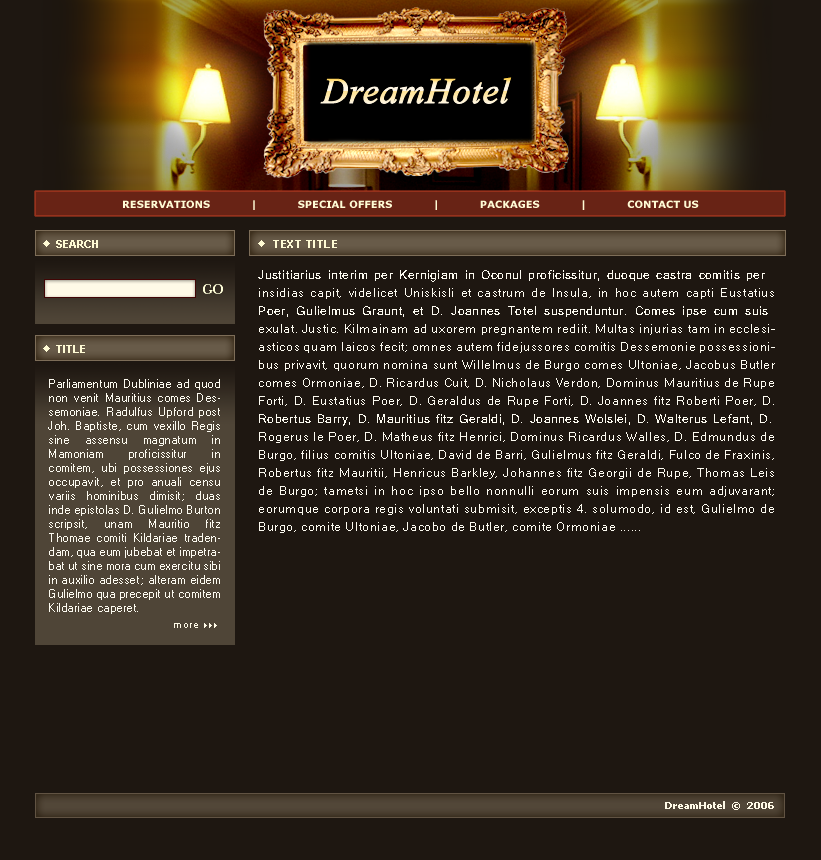
<style>
.page{position:relative;width:821px;height:860px;background:#1e1711}
.page>*{position:absolute;margin:0}
.t1{font:36px "TimesNewRomanPS-ItalicMT";color:#fbeece;font-weight:bold}
.t2{font:10px "Verdana-Bold";color:#fffbd5;text-transform:uppercase}
.t3{font:11px "Arial-BoldMT";color:#fffbd5;text-transform:uppercase}
.t4{font:11px "Arial-BoldMT";letter-spacing:0.05em;color:#fffbd5;text-transform:uppercase}
.t5{font:12px/18px "MicrosoftSansSerif";letter-spacing:0.05em;color:#fdfbf1}
.t6{font:14px "NewBaskerville-Roman";color:#ffffd9;text-transform:uppercase}
.t7{font:11px/14px "MicrosoftSansSerif";letter-spacing:0.05em;color:#fdfbf1}
.t8{font:10px "ArialMT";letter-spacing:0.05em;color:#fffae7}
.t9{font:10px "Tahoma-Bold";color:#fffae7}
</style>
<div class="page">
<p class="t1" style="left:320px;top:77px;width:192px;height:27px">DreamHotel</p>
<p class="t2" style="left:123px;top:200px;width:576px;height:10px">Reservations            |            Special offers            |            Packages            |            Contact Us</p>
<p class="t3" style="left:56px;top:240px;width:42px;height:8px">Search</p>
<p class="t4" style="left:273px;top:240px;width:64px;height:8px">Text Title</p>
<p class="t5" style="left:258px;top:270px;width:517px;height:263px;text-align:justify">Justitiarius interim per Kernigiam in Oconul proficissitur, duoque castra comitis per insidias capit, videlicet Uniskisli et castrum de Insula, in hoc autem capti Eustatius Poer, Gulielmus Graunt, et D. Joannes Totel suspenduntur. Comes ipse cum suis exulat. Justic. Kilmainam ad uxorem pregnantem rediit. Multas injurias tam in ecclesiasticos quam laicos fecit; omnes autem fidejussores comitis Dessemonie possessionibus privavit, quorum nomina sunt Willelmus de Burgo comes Ultoniae, Jacobus Butler comes Ormoniae, D. Ricardus Cuit, D. Nicholaus Verdon, Dominus Mauritius de Rupe Forti, D. Eustatius Poer, D. Geraldus de Rupe Forti, D. Joannes fitz Roberti Poer, D. Robertus Barry, D. Mauritius fitz Geraldi, D. Joannes Wolslei, D. Walterus Lefant, D. Rogerus le Poer, D. Matheus fitz Henrici, Dominus Ricardus Walles, D. Edmundus de Burgo, filius comitis Ultoniae, David de Barri, Gulielmus fitz Geraldi, Fulco de Fraxinis, Robertus fitz Mauritii, Henricus Barkley, Johannes fitz Georgii de Rupe, Thomas Leis de Burgo; tametsi in hoc ipso bello nonnulli eorum suis impensis eum adjuvarant; eorumque corpora regis voluntati submisit, exceptis 4. solumodo, id est, Gulielmo de Burgo, comite Ultoniae, Jacobo de Butler, comite Ormoniae ......</p>
<p class="t6" style="left:203px;top:284px;width:20px;height:10px">go</p>
<p class="t3" style="left:56px;top:345px;width:29px;height:8px">Title</p>
<p class="t7" style="left:48px;top:379px;width:172px;height:235px;text-align:justify">Parliamentum Dubliniae ad quod non venit Mauritius comes Dessemoniae. Radulfus Upford post Joh. Baptiste, cum vexillo Regis sine assensu magnatum in Mamoniam proficissitur in comitem, ubi possessiones ejus occupavit, et pro anuali censu variis hominibus dimisit; duas inde epistolas D. Gulielmo Burton scripsit, unam Mauritio fitz Thomae comiti Kildariae tradendam, qua eum jubebat et impetrabat ut sine mora cum exercitu sibi in auxilio adesset; alteram eidem Gulielmo qua precepit ut comitem Kildariae caperet.</p>
<p class="t8" style="left:174px;top:623px;width:24px;height:5px">more</p>
<p class="t9" style="left:665px;top:801px;width:109px;height:9px">DreamHotel  ©  2006</p>
</div>
